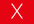
<style>
.page{position:relative;width:34px;height:24px;background:#e50512}
.page>*{position:absolute;margin:0}
.t1{font:20.5px "Roboto-Thin";color:#ffffff}
</style>
<div class="page">
<p class="t1" style="left:11px;top:3px;width:12px;height:16px">X</p>
</div>
